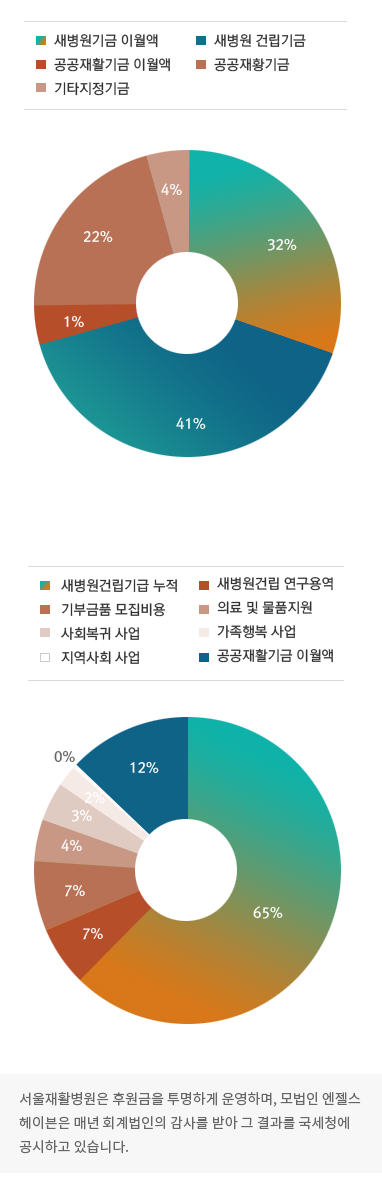
<style>
.page{position:relative;width:382px;height:1190px;background:#ffffff}
.page>*{position:absolute;margin:0}
.t1{font:14px/24px "RixMGoM";color:#333333}
.t2{font:14px "RixMGoB";color:#ffffff}
.t3{font:14px "RixMGoB";color:#666666}
.t4{font:14px/24px "NotoSansKR-Regular";color:#666666}
</style>
<div class="page">
<p class="t1" style="left:54px;top:34px;width:116px;height:62px">새병원기금 이월액<br>공공재활기금 이월액<br>기타지정기금</p>
<p class="t1" style="left:214px;top:34px;width:92px;height:38px">새병원 건립기금<br>공공재황기금</p>
<p class="t2" style="left:161px;top:183px;width:21px;height:13px">4%</p>
<p class="t2" style="left:84px;top:230px;width:29px;height:13px">22%</p>
<p class="t2" style="left:267px;top:239px;width:30px;height:12px">32%</p>
<p class="t2" style="left:64px;top:315px;width:20px;height:12px">1%</p>
<p class="t2" style="left:176px;top:417px;width:30px;height:13px">41%</p>
<p class="t1" style="left:61px;top:579px;width:116px;height:86px">새병원건립기급 누적<br>기부금품 모집비용<br>사회복귀 사업<br>지역사회 사업</p>
<p class="t1" style="left:217px;top:577px;width:116px;height:86px">새병원건립 연구용역<br>의료 및 물품지원<br>가족행복 사업<br>공공재활기금 이월액</p>
<p class="t3" style="left:54px;top:750px;width:21px;height:13px">0%</p>
<p class="t2" style="left:130px;top:762px;width:29px;height:12px">12%</p>
<p class="t2" style="left:85px;top:791px;width:20px;height:12px">2%</p>
<p class="t2" style="left:71px;top:809px;width:21px;height:13px">3%</p>
<p class="t2" style="left:61px;top:839px;width:21px;height:13px">4%</p>
<p class="t2" style="left:65px;top:884px;width:20px;height:13px">7%</p>
<p class="t2" style="left:253px;top:906px;width:30px;height:13px">65%</p>
<p class="t2" style="left:83px;top:927px;width:20px;height:13px">7%</p>
<p class="t4" style="left:19px;top:1091px;width:342px;height:63px">서울재활병원은 후원금을 투명하게 운영하며, 모법인 엔젤스<br>헤이븐은 매년 회계법인의 감사를 받아 그 결과를 국세청에 <br>공시하고 있습니다.</p>
</div>
